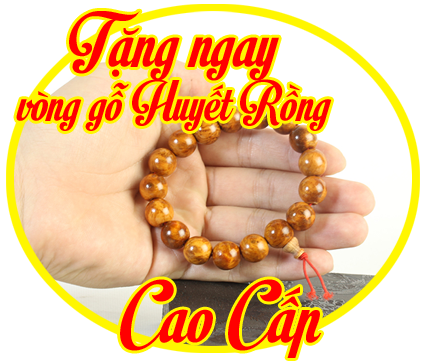
<style>
.page{position:relative;width:424px;height:363px;background:#ffffff}
.page>*{position:absolute;margin:0}
.t1{font:57px/54.5px "SVN-MotionPicture";color:#ff0000}
.t2{font:77px/54.5px "SVN-MotionPicture";color:#ff0000}
.t3{font:87px "SVN-MotionPicture";color:#ff0000}
</style>
<div class="page">
<p class="t1" style="left:16px;top:11px;width:316px;height:120px;text-align:center"><span class="t2">Tặng ngay</span> <br>vòng gỗ Huyết Rồng</p>
<p class="t3" style="left:120px;top:279px;width:202px;height:79px">Cao Cấp</p>
</div>
